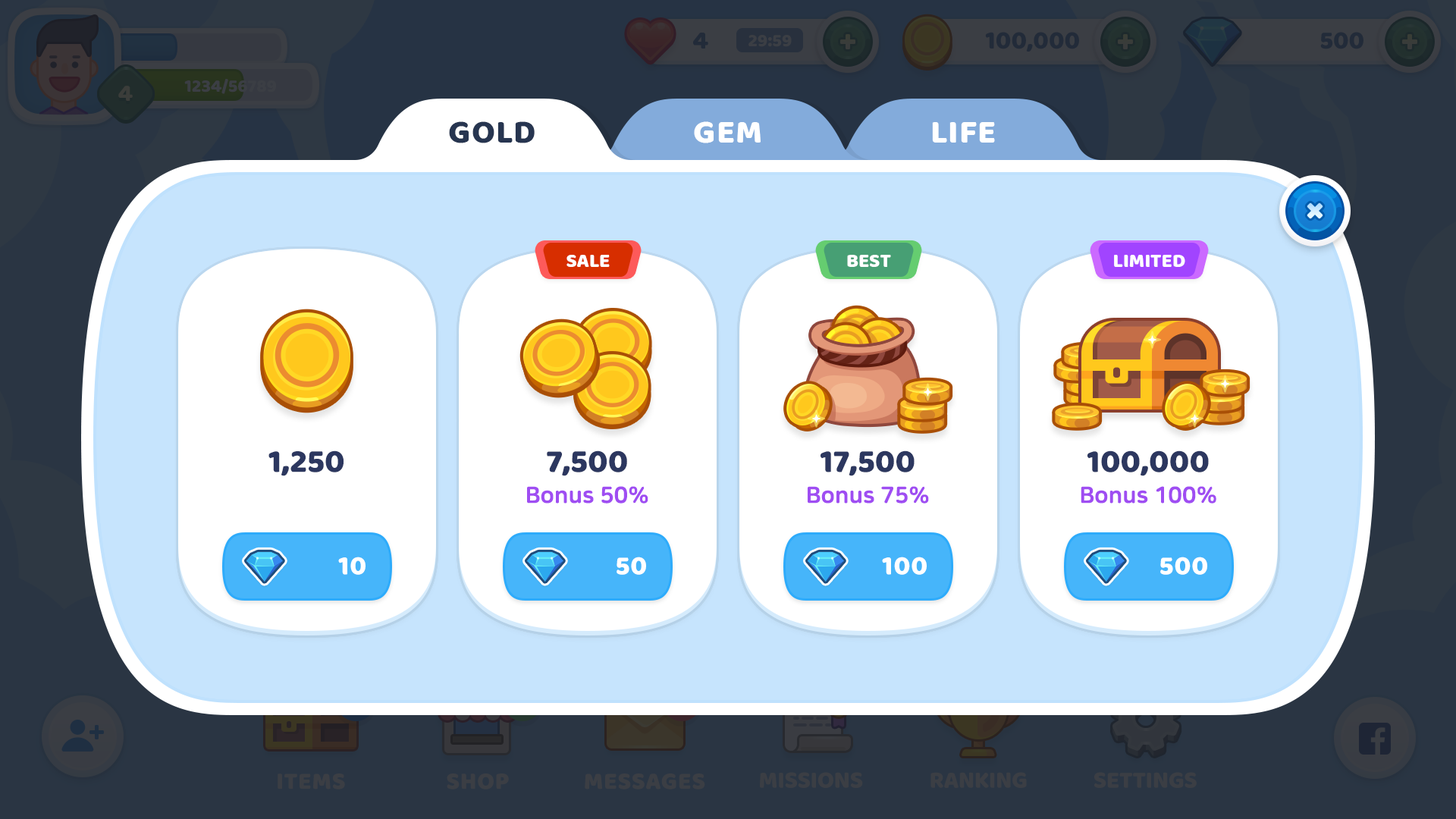
<style>
.page{position:relative;width:1456px;height:819px;background:#ffffff}
.page>*{position:absolute;margin:0}
.t1{font:33.4px "BalooBhaijaan-Regular";color:#273550;text-transform:uppercase}
.t2{font:33.4px "BalooBhaijaan-Regular";color:#ffffff;text-transform:uppercase}
.t3{font:19.8px "BalooBhaijaan-Regular";color:#ffffff;text-transform:uppercase}
.t4{font:33.4px "BalooBhaijaan-Regular";color:#2c375f}
.t5{font:22.7px "NanumSquareRoundOTFEB";color:#9f4df2}
.t6{font:27.3px "BalooBhaijaan-Regular";color:#ffffff}
</style>
<div class="page">
<p class="t1" style="left:449px;top:121px;width:86px;height:22px">Gold</p>
<p class="t2" style="left:694px;top:121px;width:67px;height:22px">Gem</p>
<p class="t2" style="left:932px;top:122px;width:63px;height:21px">life</p>
<p class="t3" style="left:566px;top:255px;width:44px;height:12px">sale</p>
<p class="t3" style="left:847px;top:255px;width:44px;height:12px">Best</p>
<p class="t3" style="left:1114px;top:255px;width:71px;height:12px">limited</p>
<p class="t4" style="left:268px;top:450px;width:76px;height:26px">1,250</p>
<p class="t4" style="left:547px;top:450px;width:80px;height:26px">7,500</p>
<p class="t4" style="left:821px;top:450px;width:94px;height:26px">17,500</p>
<p class="t4" style="left:1087px;top:450px;width:122px;height:26px">100,000</p>
<p class="t5" style="left:527px;top:486px;width:121px;height:18px">Bonus 50%</p>
<p class="t5" style="left:808px;top:486px;width:121px;height:18px">Bonus 75%</p>
<p class="t5" style="left:1081px;top:486px;width:135px;height:18px">Bonus 100%</p>
<p class="t6" style="left:338px;top:557px;width:28px;height:18px">10</p>
<p class="t6" style="left:617px;top:557px;width:29px;height:18px">50</p>
<p class="t6" style="left:882px;top:557px;width:45px;height:18px">100</p>
<p class="t6" style="left:1160px;top:557px;width:47px;height:18px">500</p>
</div>
